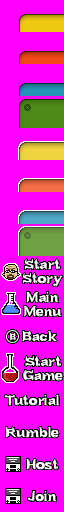
<style>
.page{position:relative;width:64px;height:512px;background:#ff00ff}
.page>*{position:absolute;margin:0}
.t1{font:13.6px/14px "Bundy-Regular";color:#ffffff;font-weight:bold;scale:1.05 1}
.t2{font:9px "Bundy-Regular";color:#ffffff;font-weight:bold}
.t3{font:13.6px "Bundy-Regular";color:#ffffff;font-weight:bold;scale:1.05 1}
</style>
<div class="page">
<p class="t1" style="left:23px;top:258px;width:40px;height:29px;text-align:center">Start<br>Story</p>
<p class="t1" style="left:24px;top:292px;width:38px;height:25px;text-align:center">Main<br>Menu</p>
<p class="t2" style="left:10px;top:333px;width:6px;height:8px">B</p>
<p class="t3" style="left:22px;top:330px;width:35px;height:12px">Back</p>
<p class="t1" style="left:23px;top:355px;width:40px;height:26px;text-align:center">Start<br>Game</p>
<p class="t3" style="left:4px;top:394px;width:56px;height:12px">Tutorial</p>
<p class="t3" style="left:5px;top:426px;width:54px;height:12px">Rumble</p>
<p class="t3" style="left:26px;top:458px;width:32px;height:12px">Host</p>
<p class="t3" style="left:27px;top:491px;width:30px;height:11px">Join</p>
</div>
